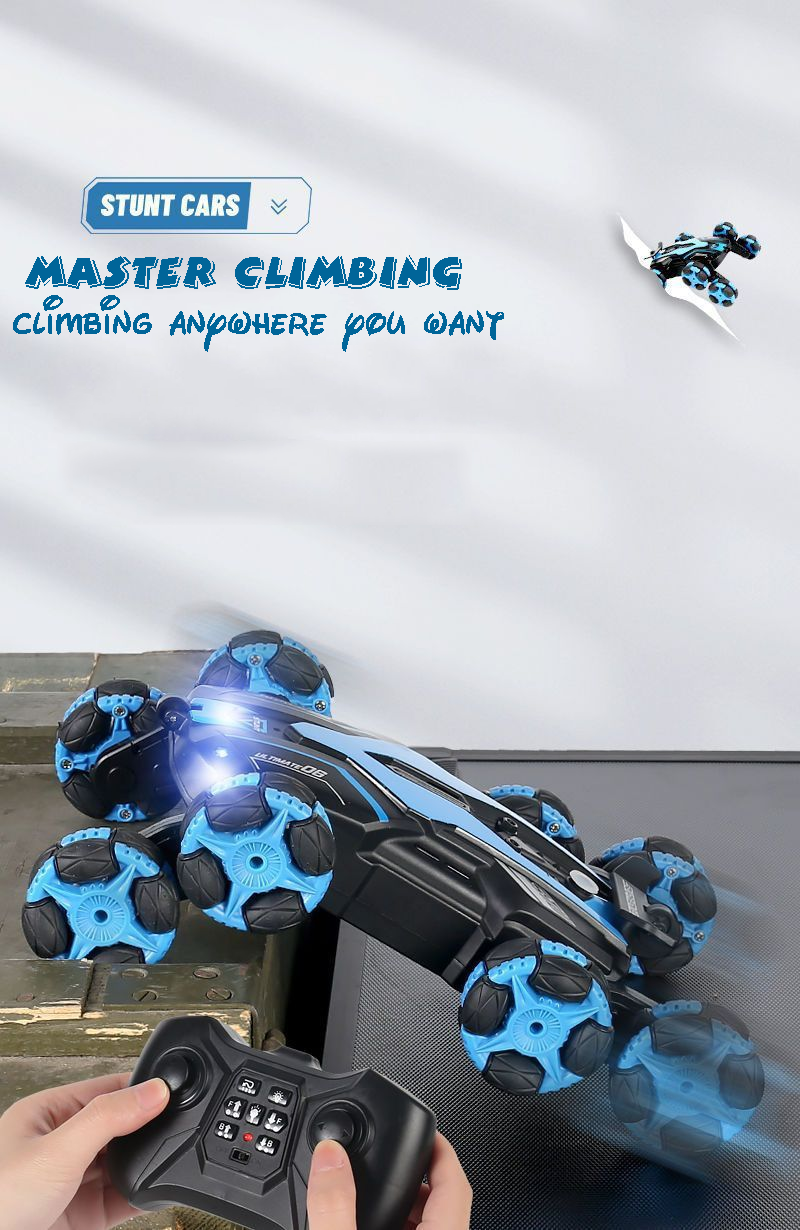
<style>
.page{position:relative;width:800px;height:1230px}
.page>*{position:absolute;margin:0}
.t1{font:48px "VPS-Gia-Dinh-Hoa";color:#006599}
.t2{font:60px "Waltograph";color:#006599}
</style>
<div class="page">
<p class="t1" style="left:25px;top:255px;width:437px;height:35px">master climbing</p>
<p class="t2" style="left:13px;top:295px;width:491px;height:57px">climbing anywhere you want</p>
</div>
